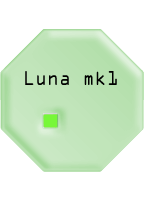
<style>
.page{position:relative;width:145px;height:200px;background:#ffffff}
.page>*{position:absolute;margin:0}
.t1{font:18px "OCRAStd";color:#000000;scale:0.92 1}
</style>
<div class="page">
<p class="t1" style="left:25px;top:71px;width:92px;height:14px">Luna mk1</p>
</div>
